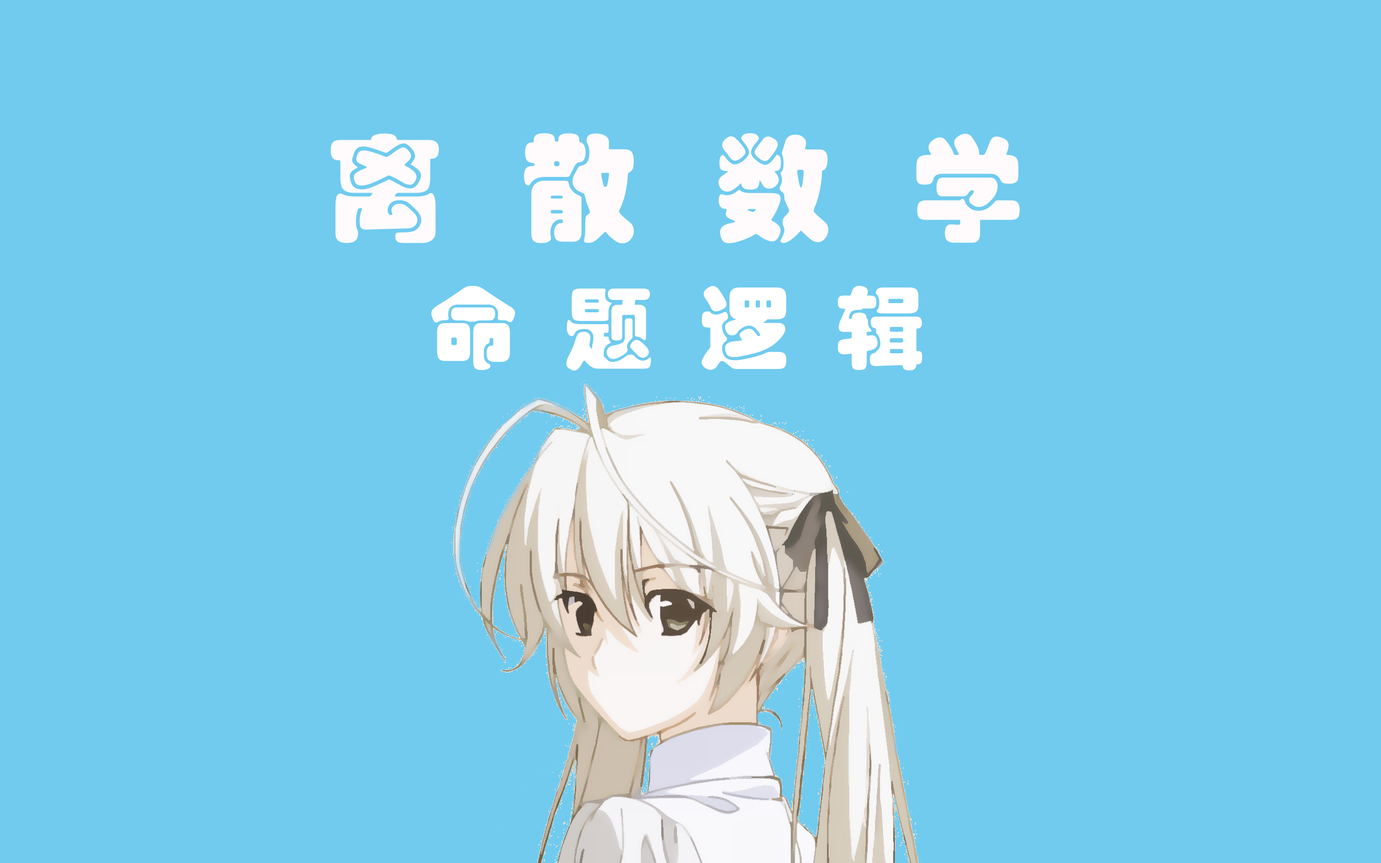
<style>
.page{position:relative;width:1381px;height:863px;background:#70cbef}
.page>*{position:absolute;margin:0}
.t1{font:116.9px "STHupo";color:#fffbfd}
.t2{font:89.9px "STHupo";color:#ffffff}
</style>
<div class="page">
<p class="t1" style="left:331px;top:133px;width:689px;height:111px">离    散    数    学</p>
<p class="t2" style="left:431px;top:285px;width:492px;height:86px">命   题   逻   辑</p>
</div>
